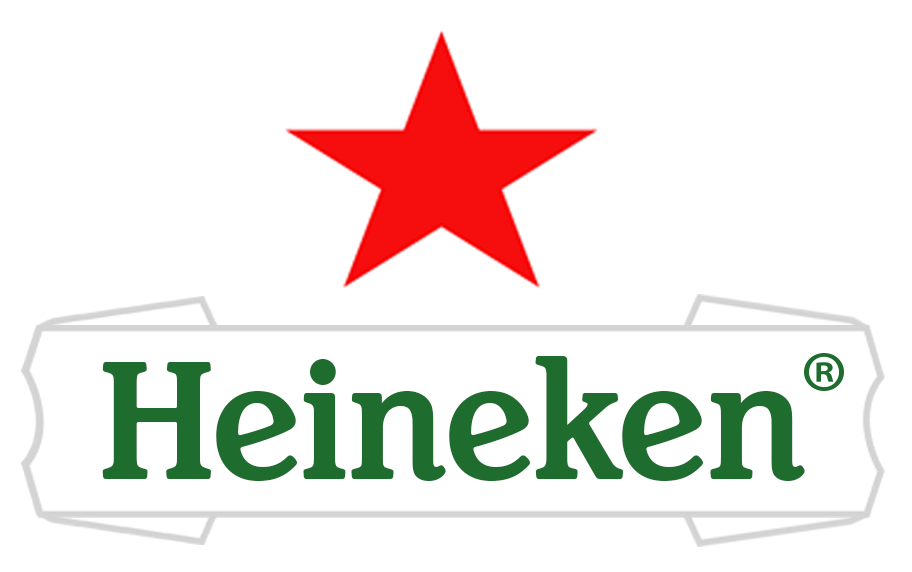
<style>
.page{position:relative;width:912px;height:572px;background:#ffffff}
.page>*{position:absolute;margin:0}
.t1{font:156.4px "HeinekenSerif-Bold";color:#1f6c2f}
</style>
<div class="page">
<p class="t1" style="left:102px;top:356px;width:703px;height:125px">Heineken</p>
</div>
